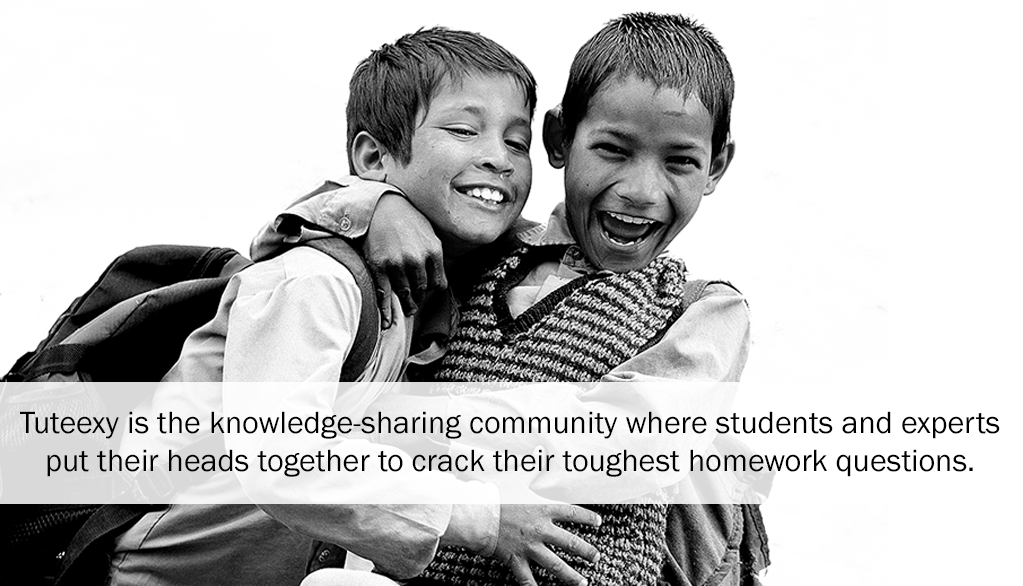
<style>
.page{position:relative;width:1023px;height:586px;background:#ffffff}
.page>*{position:absolute;margin:0}
.t1{font:31.8px "FranklinGothic-Book";color:#000000}
</style>
<div class="page">
<p class="t1" style="left:20px;top:411px;width:980px;height:66px;text-align:center">Tuteexy is the knowledge-sharing community where students and experts <br>put their heads together to crack their toughest homework questions.</p>
</div>
